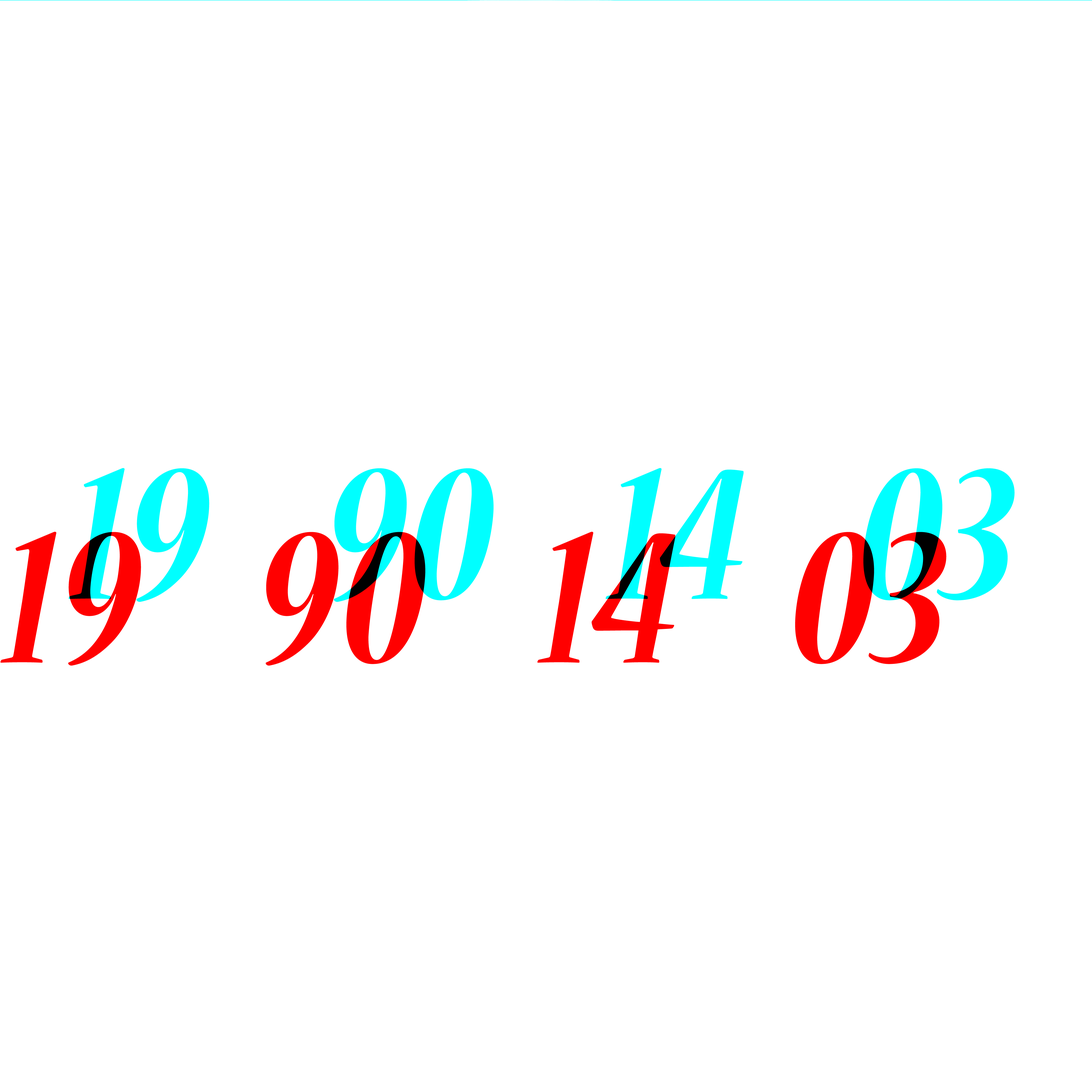
<style>
.page{position:relative;width:1092px;height:1092px;background:#ffffff}
.page>*{position:absolute;margin:0}
.t1{font:222.2px "NuevaStd-BoldCondItalic";color:#00ffff}
</style>
<div class="page">
<p class="t1" style="left:69px;top:467px;width:946px;height:134px">19    90    14    03</p>
</div>
